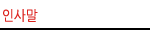
<style>
.page{position:relative;width:150px;height:30px;background:#ffffff}
.page>*{position:absolute;margin:0}
.t1{font:14px "NanumGothic";color:#dc241f;scale:0.9 1}
</style>
<div class="page">
<p class="t1" style="left:3px;top:9px;width:35px;height:13px">인사말</p>
</div>
